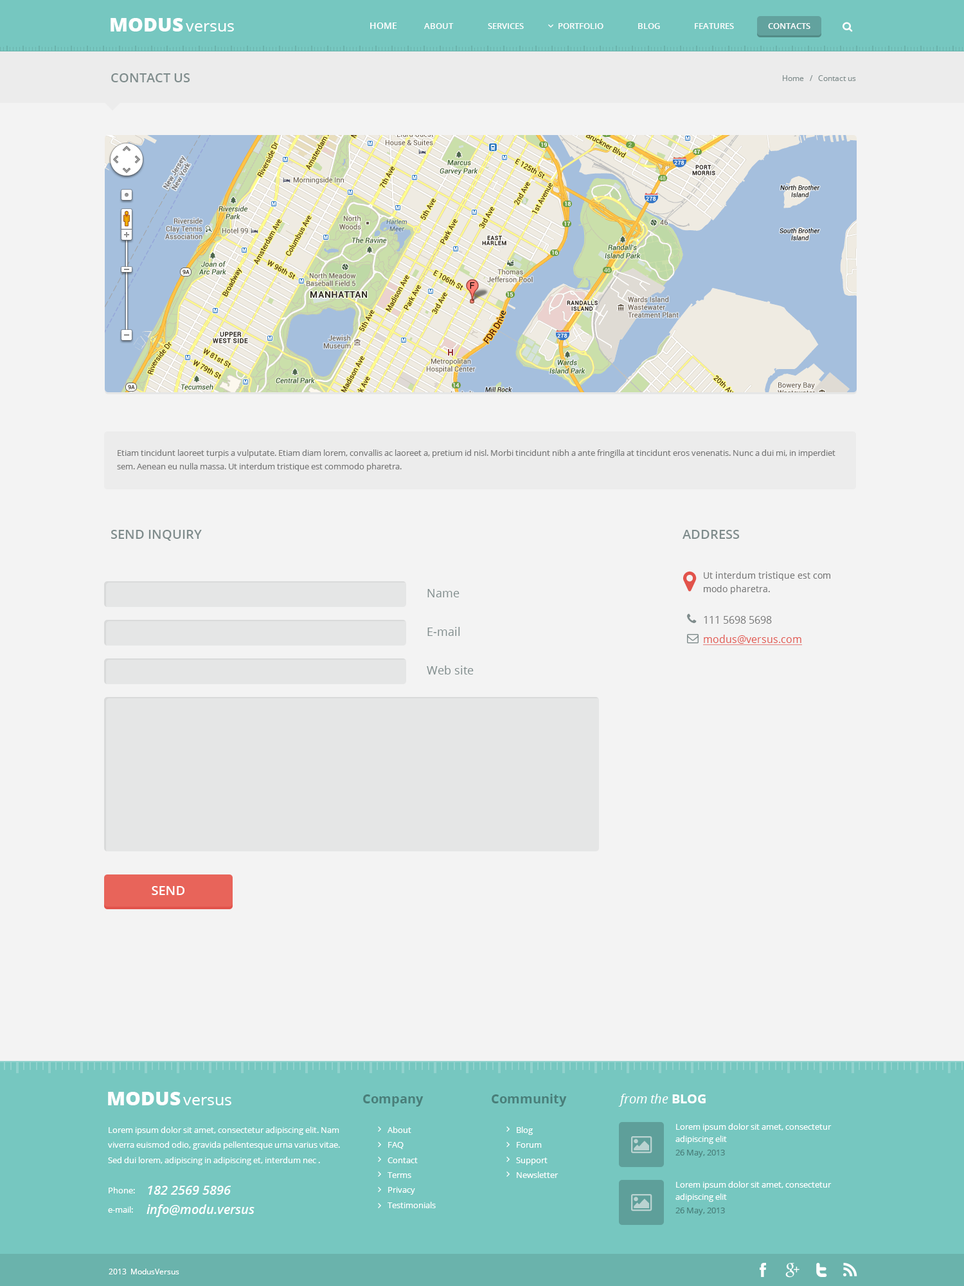
<style>
.page{position:relative;width:964px;height:1286px;background:#f3f3f3}
.page>*{position:absolute;margin:0}
.t1{font:19.3px "OpenSans-Extrabold";color:#ffffff}
.t2{font:16.1px "OpenSans";color:#ffffff}
.t3{font:9px "OpenSans-Semibold";color:#ffffff}
.t4{font:8.4px "OpenSans-Semibold";color:#ffffff}
.t5{font:12.9px "OpenSans-Semibold";color:#7f8c8c}
.t6{font:7.7px "OpenSans";color:#7f8c8c}
.t7{font:8.4px/13.4px "OpenSans";color:#777777}
.t8{font:12.9px "OpenSans-Semibold";color:#7f8c8c;text-transform:uppercase}
.t9{font:9px/13.4px "OpenSans";color:#777777}
.t10{font:11.6px "OpenSans";color:#7f8c8c}
.t11{font:10.3px "OpenSans";color:#777777}
.t12{font:10.3px "OpenSans";color:#e2534b;text-decoration:underline}
.t13{font:12.9px "OpenSans-Semibold";color:#ffffff}
.t14{font:12.9px "OpenSans-Bold";color:#497e79}
.t15{font:12.9px "OpenSans-Italic";color:#ffffff}
.t16{font:12.9px "OpenSans-Bold";color:#ffffff}
.t17{font:8.4px/15px "OpenSans";color:#ffffff}
.t18{font:8.4px/12.5px "OpenSans";color:#ffffff}
.t19{font:8.4px "OpenSans";color:#497e79}
.t20{font:8.4px "OpenSans";color:#ffffff}
.t21{font:12.9px "OpenSans-SemiboldItalic";color:#ffffff}
.t22{font:7.7px "OpenSans";color:#ffffff}
</style>
<div class="page">
<p class="t1" style="left:111px;top:18px;width:72px;height:14px">MODUS</p>
<p class="t2" style="left:186px;top:23px;width:48px;height:9px">versus</p>
<p class="t3" style="left:370px;top:22px;width:27px;height:7px">HOME</p>
<p class="t4" style="left:424px;top:23px;width:30px;height:6px">ABOUT</p>
<p class="t4" style="left:488px;top:23px;width:36px;height:6px">SERVICES</p>
<p class="t4" style="left:559px;top:23px;width:45px;height:6px">PORTFOLIO</p>
<p class="t4" style="left:638px;top:23px;width:22px;height:6px">BLOG</p>
<p class="t4" style="left:695px;top:23px;width:39px;height:6px">FEATURES</p>
<p class="t4" style="left:768px;top:23px;width:43px;height:6px">CONTACTS</p>
<p class="t5" style="left:111px;top:73px;width:79px;height:9px">CONTACT US</p>
<p class="t6" style="left:783px;top:75px;width:73px;height:6px">Home   /   Contact us</p>
<p class="t7" style="left:117px;top:449px;width:719px;height:22px">Etiam tincidunt laoreet turpis a vulputate. Etiam diam lorem, convallis ac laoreet a, pretium id nisl. Morbi tincidunt nibh a ante fringilla at tincidunt eros venenatis. Nunc a dui mi, in imperdiet sem. Aenean eu nulla massa. Ut interdum tristique est commodo pharetra.</p>
<p class="t8" style="left:111px;top:530px;width:91px;height:11px">Send inquiry</p>
<p class="t8" style="left:683px;top:530px;width:57px;height:9px">ADDRESS</p>
<p class="t9" style="left:704px;top:572px;width:127px;height:22px">Ut interdum tristique est com<br>modo pharetra.</p>
<p class="t10" style="left:428px;top:589px;width:32px;height:8px">Name</p>
<p class="t11" style="left:704px;top:616px;width:68px;height:8px">111 5698 5698</p>
<p class="t10" style="left:428px;top:627px;width:32px;height:9px">E-mail</p>
<p class="t12" style="left:703px;top:634px;width:99px;height:11px">modus@versus.com</p>
<p class="t10" style="left:427px;top:665px;width:47px;height:9px">Web site</p>
<p class="t13" style="left:152px;top:886px;width:32px;height:9px">SEND</p>
<p class="t1" style="left:108px;top:1092px;width:73px;height:13px">MODUS</p>
<p class="t2" style="left:183px;top:1097px;width:48px;height:8px">versus</p>
<p class="t14" style="left:363px;top:1094px;width:61px;height:12px">Company</p>
<p class="t14" style="left:492px;top:1094px;width:75px;height:12px">Community</p>
<p class="t15" style="left:618px;top:1094px;width:88px;height:12px">from the <span class="t16">BLOG</span></p>
<p class="t17" style="left:108px;top:1126px;width:232px;height:39px">Lorem ipsum dolor sit amet, consectetur adipiscing elit. Nam viverra euismod odio, gravida pellentesque urna varius vitae. Sed dui lorem, adipiscing in adipiscing et, interdum nec .</p>
<p class="t17" style="left:388px;top:1126px;width:48px;height:82px">About<br>FAQ<br>Contact<br>Terms<br>Privacy<br>Testimonials</p>
<p class="t17" style="left:516px;top:1126px;width:43px;height:52px">Blog<br>Forum<br>Support<br>Newsletter</p>
<p class="t18" style="left:676px;top:1123px;width:156px;height:21px">Lorem ipsum dolor sit amet, consectetur adipiscing elit</p>
<p class="t19" style="left:676px;top:1149px;width:49px;height:8px">26 May, 2013</p>
<p class="t18" style="left:676px;top:1181px;width:156px;height:21px">Lorem ipsum dolor sit amet, consectetur adipiscing elit</p>
<p class="t20" style="left:109px;top:1187px;width:26px;height:6px">Phone:</p>
<p class="t21" style="left:148px;top:1185px;width:83px;height:9px">182 2569 5896</p>
<p class="t20" style="left:108px;top:1206px;width:25px;height:6px">e-mail:</p>
<p class="t21" style="left:147px;top:1204px;width:108px;height:13px">info@modu.versus</p>
<p class="t19" style="left:676px;top:1207px;width:49px;height:8px">26 May, 2013</p>
<p class="t22" style="left:109px;top:1268px;width:70px;height:6px">2013  ModusVersus</p>
</div>
